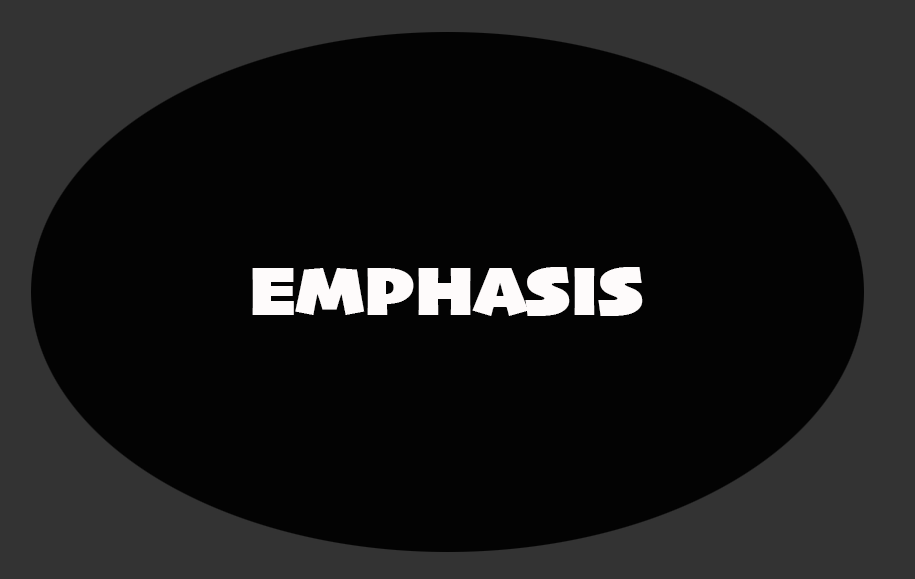
<style>
.page{position:relative;width:915px;height:579px;background:#030303}
.page>*{position:absolute;margin:0}
.t1{font:72px "Skia-Black";color:#fefbfb}
</style>
<div class="page">
<p class="t1" style="left:252px;top:267px;width:391px;height:49px">EMPHASIS</p>
</div>
